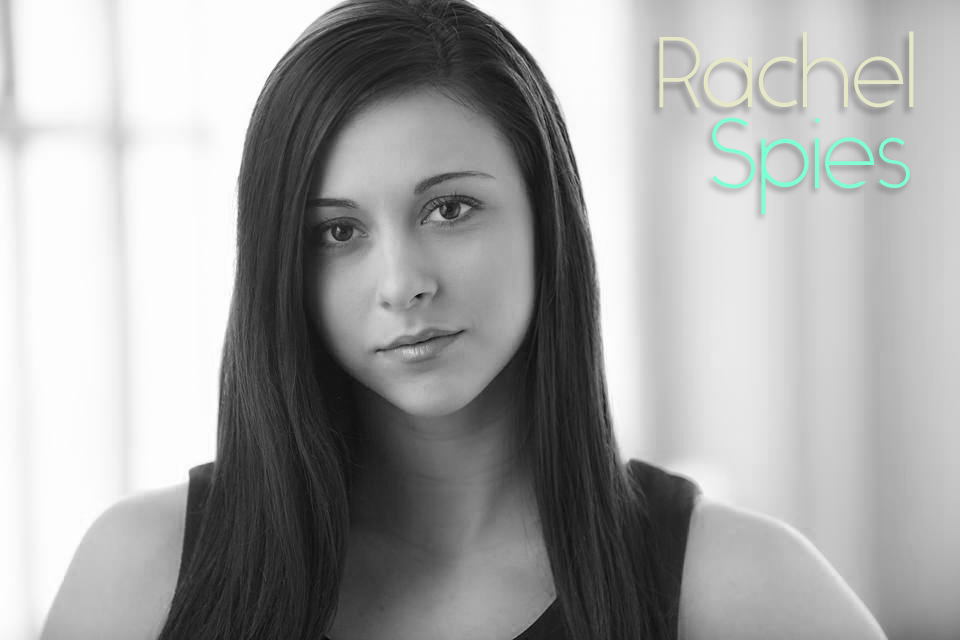
<style>
.page{position:relative;width:960px;height:640px}
.page>*{position:absolute;margin:0}
.t1{font:100px "Alcubierre";color:#e6e7c7}
.t2{font:100px "Alcubierre";color:#7fffd4}
</style>
<div class="page">
<p class="t1" style="left:659px;top:31px;width:255px;height:77px">Rachel</p>
<p class="t2" style="left:712px;top:117px;width:198px;height:98px">Spies</p>
</div>
